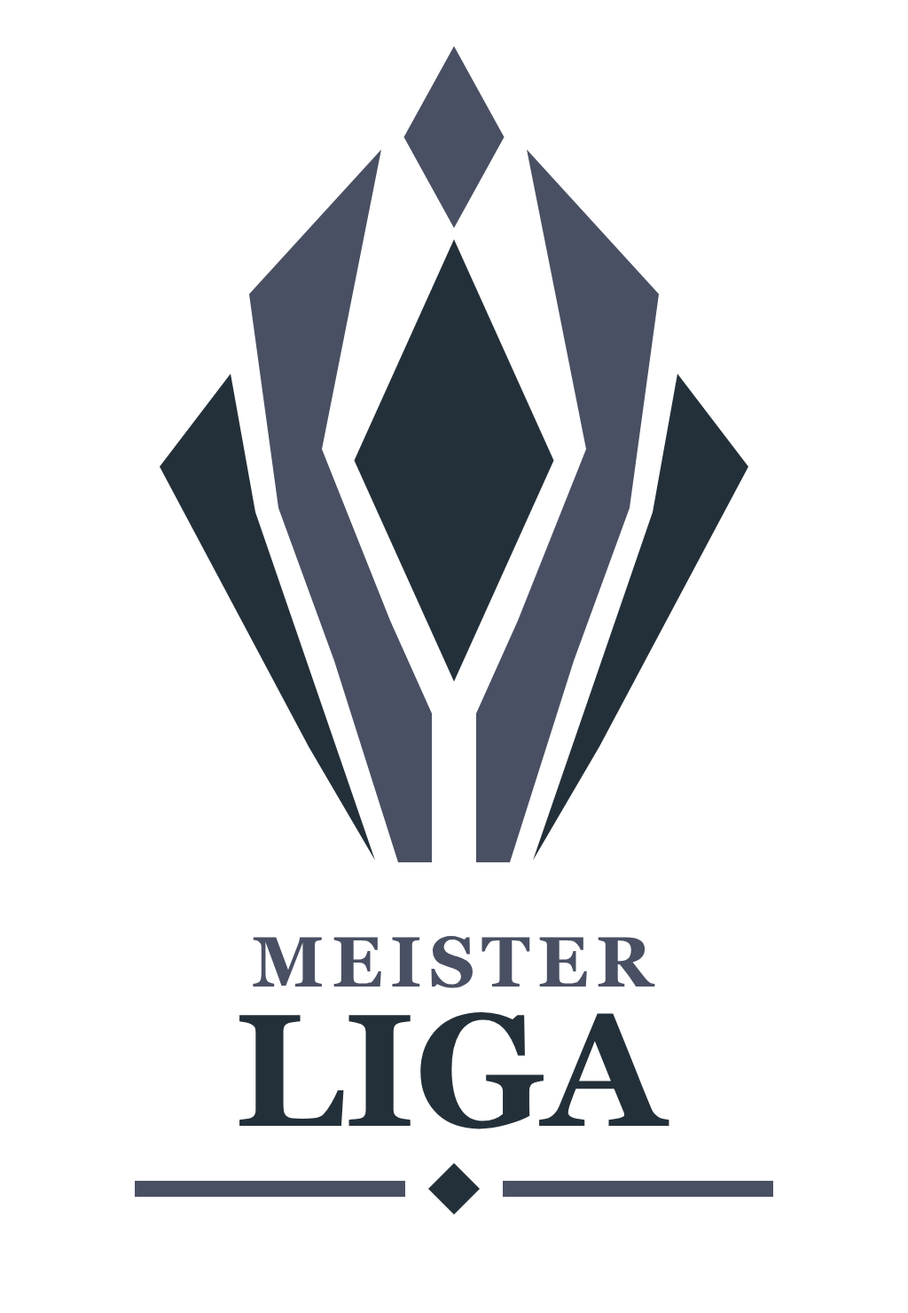
<style>
.page{position:relative;width:908px;height:1313px;background:#ffffff}
.page>*{position:absolute;margin:0}
.t1{font:71px "Georgia-Bold";letter-spacing:0.1em;color:#4a5063}
.t2{font:159.7px "Georgia-Bold";color:#243039}
</style>
<div class="page">
<p class="t1" style="left:253px;top:936px;width:403px;height:52px">MEISTER</p>
<p class="t2" style="left:239px;top:1011px;width:431px;height:118px">LIGA</p>
</div>
